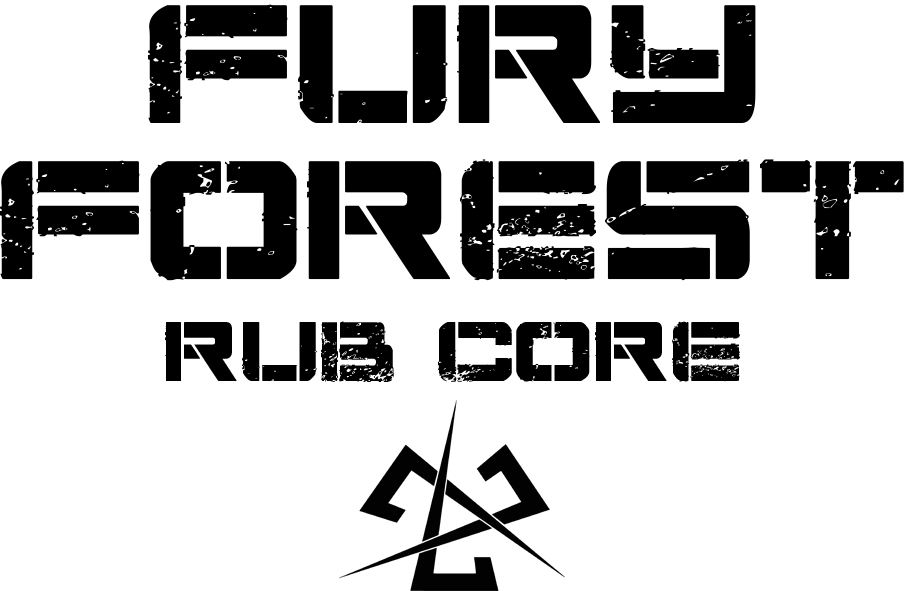
<style>
.page{position:relative;width:904px;height:591px;background:#ffffff}
.page>*{position:absolute;margin:0}
.t1{font:200px "DamageInc";color:#000000}
.t2{font:100px "DamageInc";color:#000000}
</style>
<div class="page">
<p class="t1" style="left:148px;top:4px;width:608px;height:119px">fury</p>
<p class="t1" style="left:0px;top:159px;width:904px;height:122px">forest</p>
<p class="t2" style="left:165px;top:321px;width:575px;height:61px">rub core</p>
</div>
